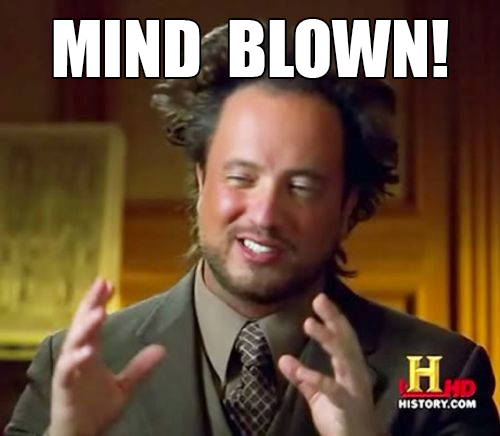
<style>
.page{position:relative;width:500px;height:436px}
.page>*{position:absolute;margin:0}
.t1{font:72px "Impact";color:#ffffff}
</style>
<div class="page">
<p class="t1" style="left:53px;top:19px;width:396px;height:59px">MIND  BLOWN!</p>
</div>
